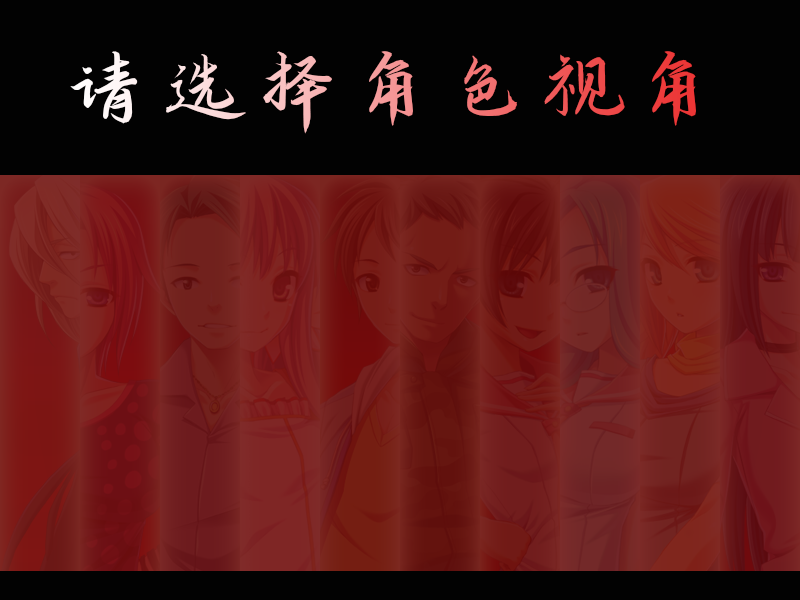
<style>
.page{position:relative;width:800px;height:600px;background:#020202}
.page>*{position:absolute;margin:0}
.t1{font:105.9px "slideyouran-Regular"}
</style>
<div class="page">
<p class="t1" style="left:70px;top:51px;width:626px;height:83px">请选择角色视角</p>
</div>
